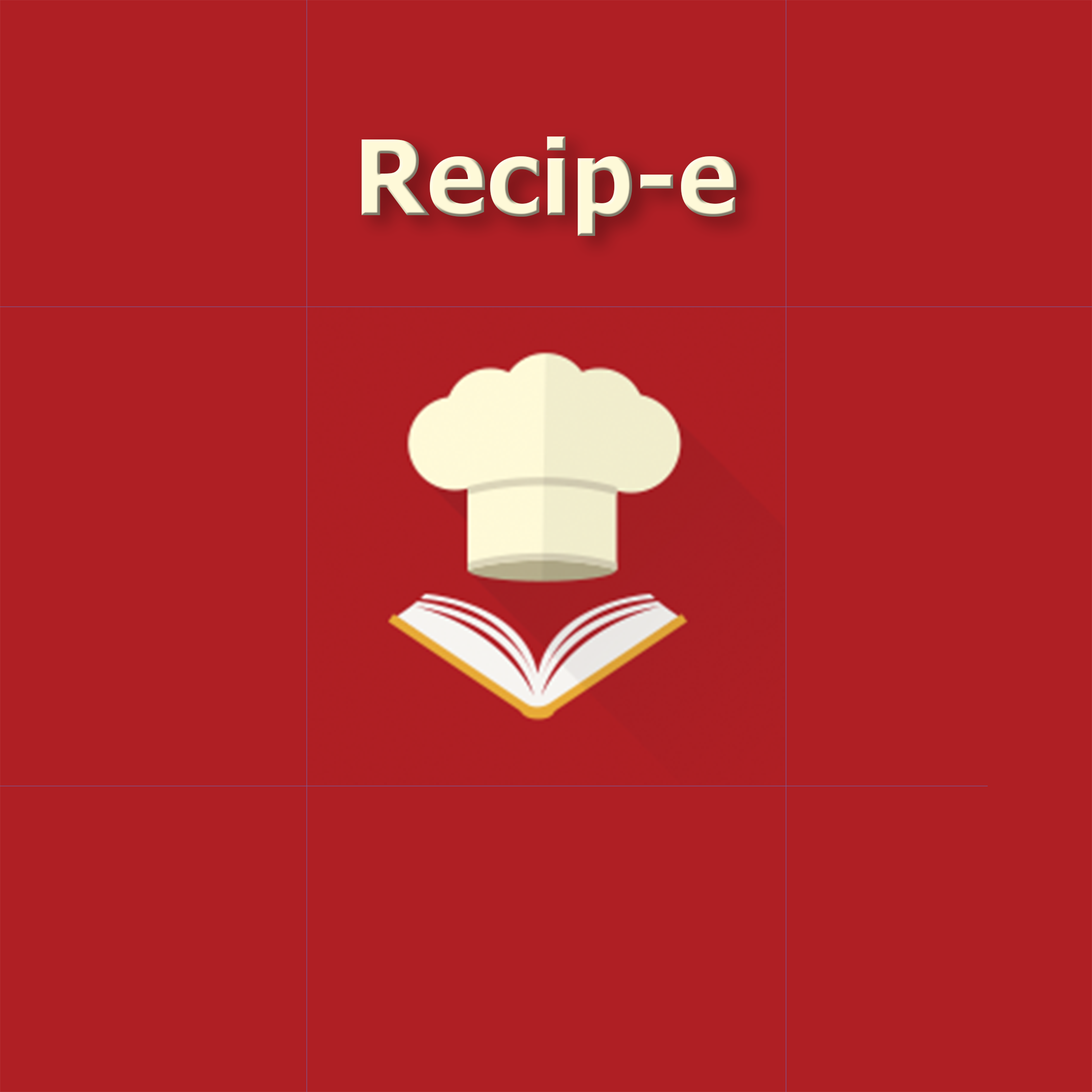
<style>
.page{position:relative;width:1092px;height:1092px;background:#af1f24}
.page>*{position:absolute;margin:0}
.t1{font:104px "Tahoma-Bold";color:#fef9d8}
</style>
<div class="page">
<p class="t1" style="left:362px;top:136px;width:374px;height:100px">Recip-e</p>
</div>
